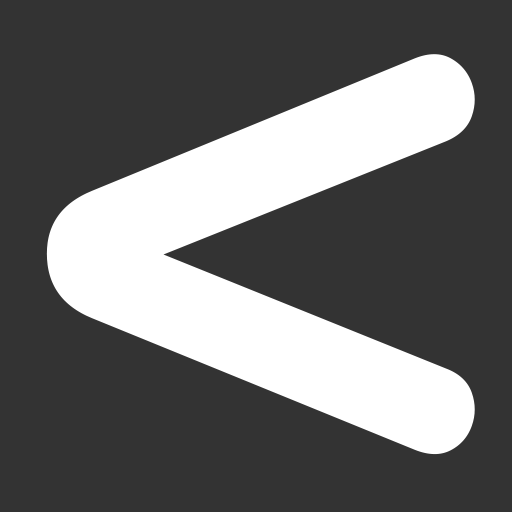
<style>
.page{position:relative;width:512px;height:512px;background:#333333}
.page>*{position:absolute;margin:0}
.t1{font:838.1px "Nunito-ExtraBold";color:#ffffff}
</style>
<div class="page">
<p class="t1" style="left:46px;top:54px;width:429px;height:401px">&lt;</p>
</div>
